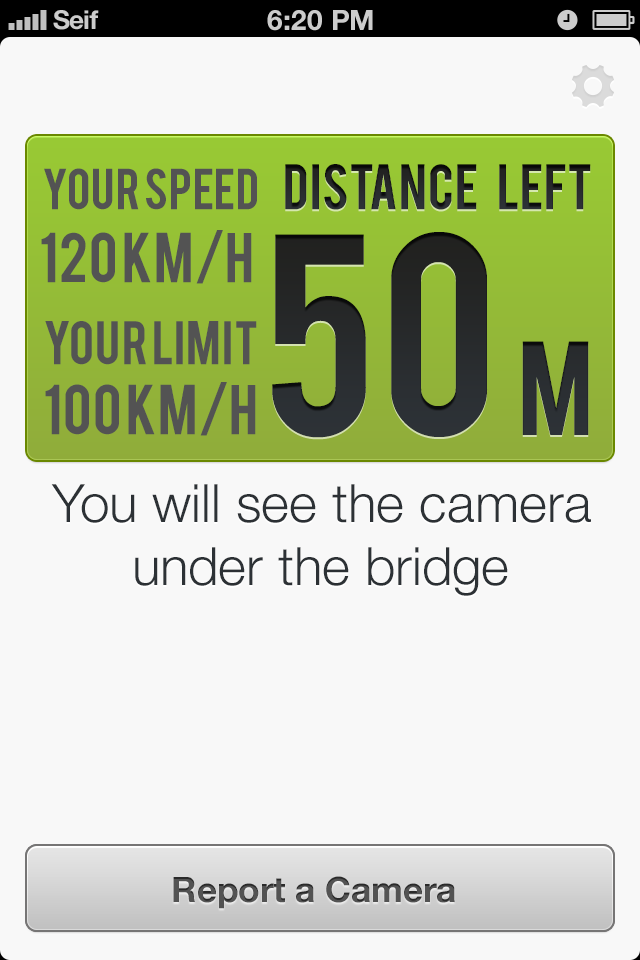
<style>
.page{position:relative;width:640px;height:960px;background:#f8f8f8}
.page>*{position:absolute;margin:0}
.t1{font:45px "Bebas";color:#535353}
.t2{font:50px "Bebas";color:#242626}
.t3{font:55px "Bebas";color:#535353}
.t4{font:225px "Bebas";color:#272a2c}
.t5{font:105px "Bebas";color:#272a2c}
.t6{font:48px "Bebas";color:#535353}
.t7{font:53px "HelveticaNeue-Light";color:#2c3135}
.t8{font:35px "HelveticaNeue-Bold";color:#535353}
</style>
<div class="page">
<p class="t1" style="left:44px;top:168px;width:213px;height:42px">Your Speed</p>
<p class="t2" style="left:285px;top:164px;width:306px;height:46px">Distance    LEft</p>
<p class="t3" style="left:41px;top:230px;width:211px;height:54px">120 KM/H</p>
<p class="t4" style="left:272px;top:232px;width:317px;height:206px">50 <span class="t5">m</span></p>
<p class="t6" style="left:45px;top:321px;width:212px;height:44px">Your Limit</p>
<p class="t3" style="left:45px;top:382px;width:211px;height:54px">100 KM/h</p>
<p class="t7" style="left:51px;top:484px;width:540px;height:112px;text-align:center">You will see the camera under the bridge</p>
<p class="t8" style="left:173px;top:876px;width:282px;height:33px">Report a Camera</p>
</div>
